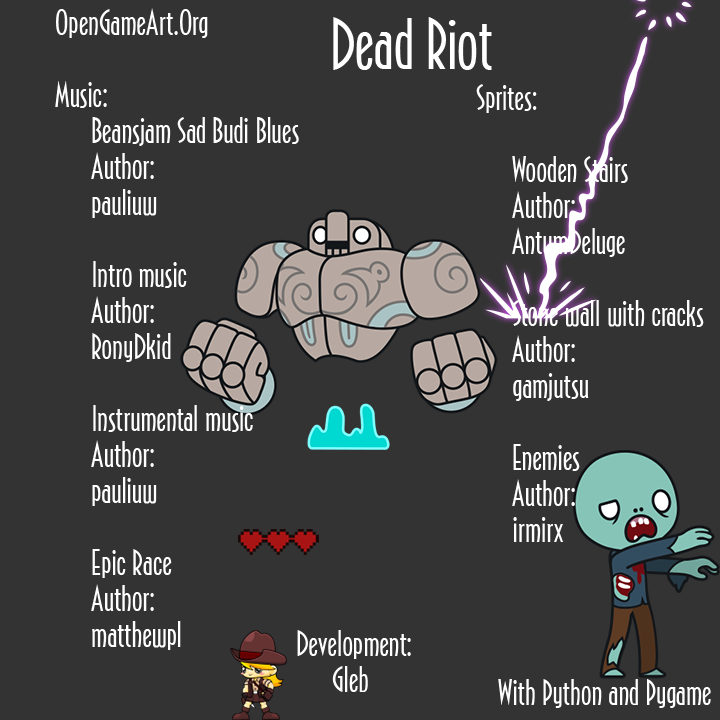
<style>
.page{position:relative;width:720px;height:720px;background:#333333}
.page>*{position:absolute;margin:0}
.t1{font:30px "Port-Arthur";color:#ffffff}
.t2{font:60px "Port-Arthur";color:#ffffff}
</style>
<div class="page">
<p class="t1" style="left:55px;top:8px;width:244px;height:642px">OpenGameArt.Org<br><br>Music:<br> Beansjam Sad Budi Blues<br> Author: <br> pauliuw<br><br> Intro music<br> Author: <br> RonyDkid<br><br> Instrumental music<br> Author: <br> pauliuw<br><br> Epic Race<br> Author: <br> matthewpl</p>
<p class="t2" style="left:333px;top:17px;width:159px;height:53px">Dead Riot</p>
<p class="t1" style="left:476px;top:84px;width:228px;height:458px">Sprites:<br> <br> Wooden Stairs<br> Author: <br> AntumDeluge<br><br> Stone wall with cracks<br> Author:<br> gamjutsu<br> <br> Enemies<br> Author:<br> irmirx</p>
<p class="t1" style="left:297px;top:630px;width:114px;height:62px">Development:<br> Gleb</p>
<p class="t1" style="left:498px;top:679px;width:213px;height:29px">With Python and Pygame</p>
</div>
